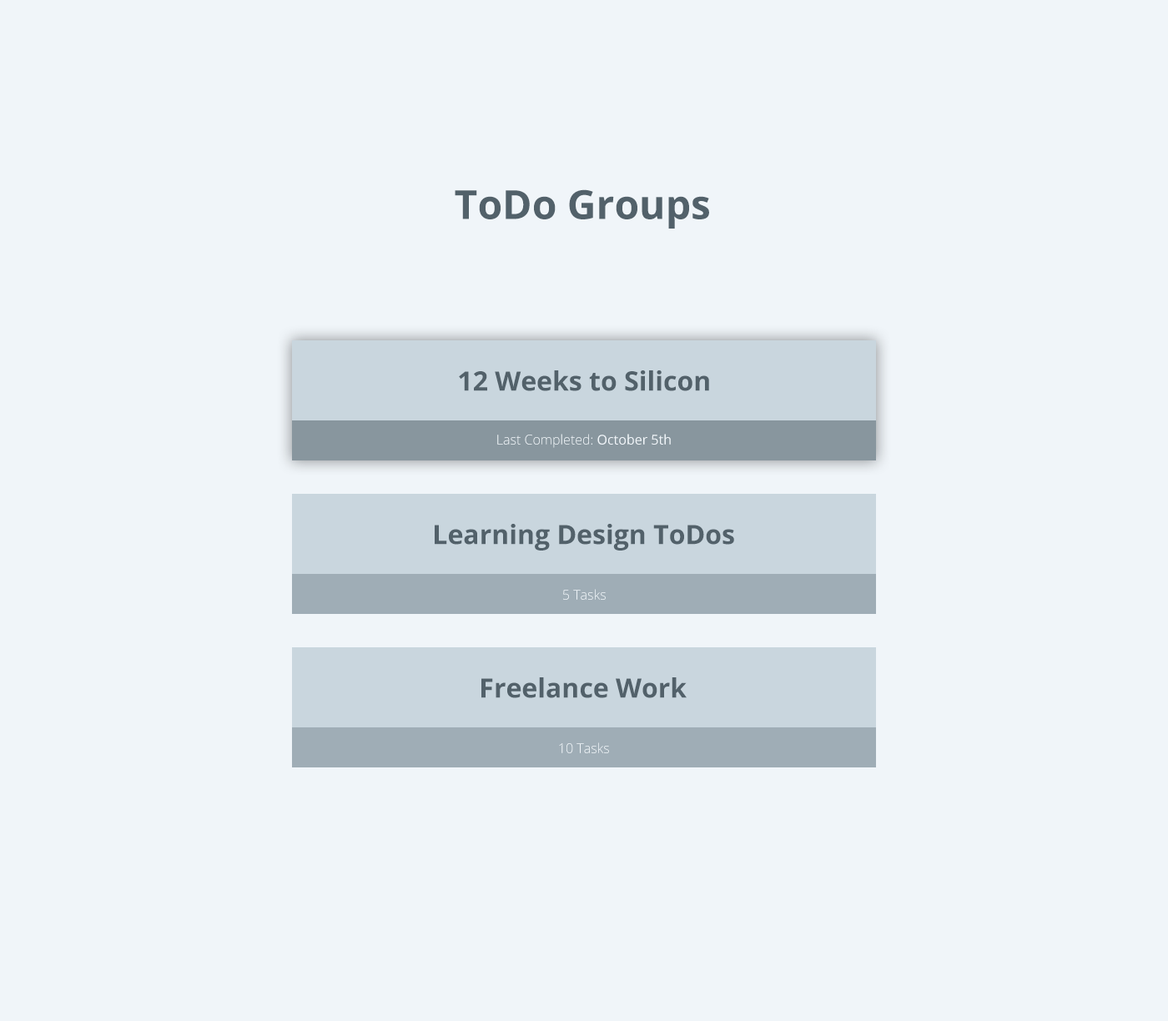
<style>
.page{position:relative;width:1168px;height:1021px;background:#f0f5f9}
.page>*{position:absolute;margin:0}
.t1{font:40px "OpenSans-Bold";color:#52616a}
.t2{font:26.7px "OpenSans-Bold";color:#52616a}
.t3{font:13.3px "OpenSans-Light";color:#f0f5f9}
.t4{font:13.3px "OpenSans";color:#f0f5f9}
</style>
<div class="page">
<p class="t1" style="left:455px;top:189px;width:254px;height:40px">ToDo Groups</p>
<p class="t2" style="left:459px;top:370px;width:250px;height:21px">12 Weeks to Silicon</p>
<p class="t3" style="left:497px;top:434px;width:174px;height:14px">Last Completed:<span class="t4"> October 5th</span></p>
<p class="t2" style="left:435px;top:524px;width:299px;height:27px">Learning Design ToDos</p>
<p class="t3" style="left:563px;top:589px;width:43px;height:11px">5 Tasks</p>
<p class="t2" style="left:481px;top:677px;width:206px;height:21px">Freelance Work</p>
<p class="t3" style="left:559px;top:742px;width:50px;height:11px">10 Tasks</p>
</div>
